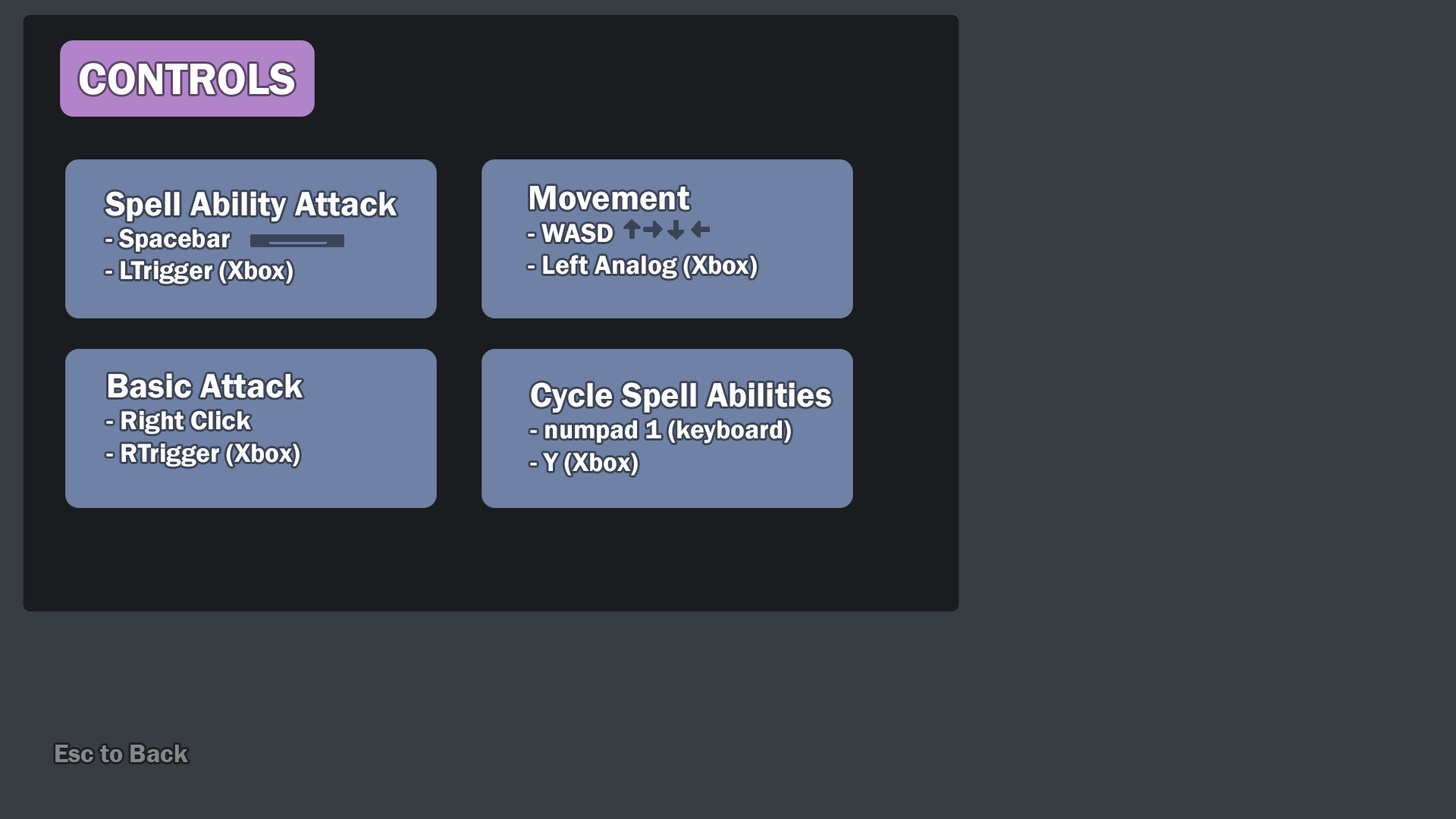
<style>
.page{position:relative;width:1456px;height:819px;background:#383d43}
.page>*{position:absolute;margin:0}
.t1{font:45.6px "FranklinGothic-Demi";color:#ffffff}
.t2{font:26.8px "FranklinGothic-Demi";color:#ffffff}
.t3{font:34.9px "FranklinGothic-Demi";color:#ffffff}
.t4{font:25.8px "FranklinGothic-Demi";color:#858788}
</style>
<div class="page">
<p class="t1" style="left:80px;top:63px;width:214px;height:32px">CONTROLS</p>
<p class="t2" style="left:528px;top:186px;width:229px;height:93px"><span class="t3">Movement<br></span>- WASD<br>- Left Analog (Xbox)</p>
<p class="t2" style="left:105px;top:191px;width:292px;height:93px"><span class="t3">Spell Ability Attack<br></span>- Spacebar<br>- LTrigger (Xbox)</p>
<p class="t2" style="left:106px;top:373px;width:197px;height:94px"><span class="t3">Basic Attack<br></span>- Right Click<br>- RTrigger (Xbox)</p>
<p class="t2" style="left:530px;top:382px;width:301px;height:93px"><span class="t3">Cycle Spell Abilities<br></span>- numpad 1 (keyboard)<br>- Y (Xbox)</p>
<p class="t4" style="left:55px;top:745px;width:133px;height:17px">Esc to Back</p>
</div>
